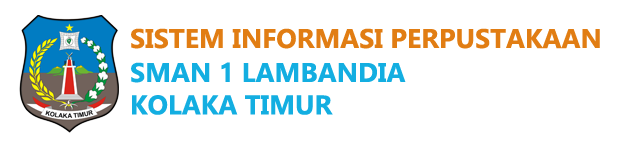
<style>
.page{position:relative;width:617px;height:146px;background:#ffffff}
.page>*{position:absolute;margin:0}
.t1{font:27px "Gadugi-Bold";color:#e17d13}
.t2{font:27px "Gadugi-Bold";color:#13aee1}
</style>
<div class="page">
<p class="t1" style="left:131px;top:28px;width:469px;height:21px">SISTEM INFORMASI PERPUSTAKAAN</p>
<p class="t2" style="left:131px;top:62px;width:275px;height:53px">SMAN 1 LAMBANDIA<br>KOLAKA TIMUR</p>
</div>
